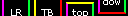
<style>
.page{position:relative;width:128px;height:16px;background:#000000}
.page>*{position:absolute;margin:0}
.t1{font:10px "Verdana";color:#ffffff}
</style>
<div class="page">
<p class="t1" style="left:11px;top:9px;width:11px;height:7px">LR</p>
<p class="t1" style="left:41px;top:9px;width:12px;height:7px">TB</p>
<p class="t1" style="left:72px;top:9px;width:16px;height:9px">top</p>
</div>
